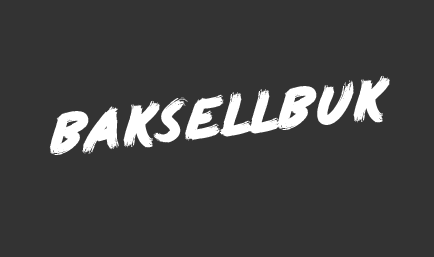
<style>
.page{position:relative;width:434px;height:257px;background:#333333}
.page>*{position:absolute;margin:0}
.t1{font:48px "Elrotex";letter-spacing:0.15em;color:#ffffff;scale:1.06 1}
</style>
<div class="page">
<p class="t1" style="left:49px;top:75px;width:341px;height:80px;rotate:-6deg">BaksellBuk</p>
</div>
